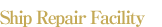
<style>
.page{position:relative;width:162px;height:27px;background:#ffffff}
.page>*{position:absolute;margin:0}
.t1{font:18px "RyuminPro-ExBold";letter-spacing:-0.08em;color:#c4a956}
</style>
<div class="page">
<p class="t1" style="left:0px;top:10px;width:145px;height:17px">Ship Repair Facility</p>
</div>
